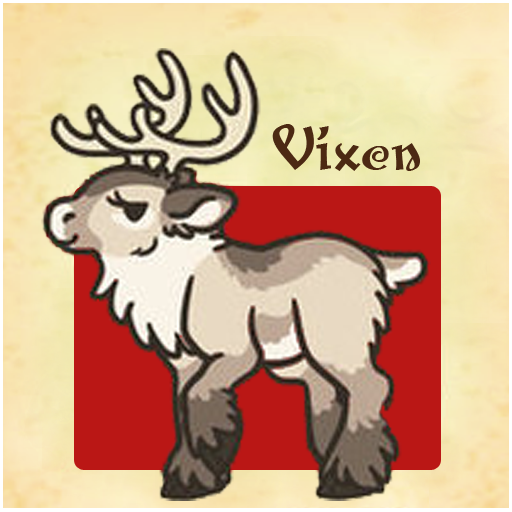
<style>
.page{position:relative;width:512px;height:512px}
.page>*{position:absolute;margin:0}
.t1{font:66.7px "SantasBigSecretBB";color:#4c2913}
</style>
<div class="page">
<p class="t1" style="left:272px;top:124px;width:148px;height:47px">Vixen</p>
</div>
